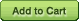
<style>
.page{position:relative;width:79px;height:21px;background:#bde378}
.page>*{position:absolute;margin:0}
.t1{font:10px "Swiss721BT-Medium";letter-spacing:0.01em;color:#2f4b14}
</style>
<div class="page">
<p class="t1" style="left:12px;top:6px;width:54px;height:9px">Add to Cart</p>
</div>
